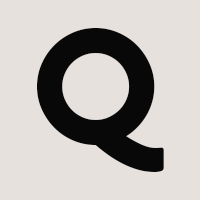
<style>
.page{position:relative;width:200px;height:200px;background:#e6e1dd}
.page>*{position:absolute;margin:0}
.t1{font:150px "Paralex-Regular2";color:#080808}
</style>
<div class="page">
<p class="t1" style="left:37px;top:28px;width:127px;height:144px">Q</p>
</div>
